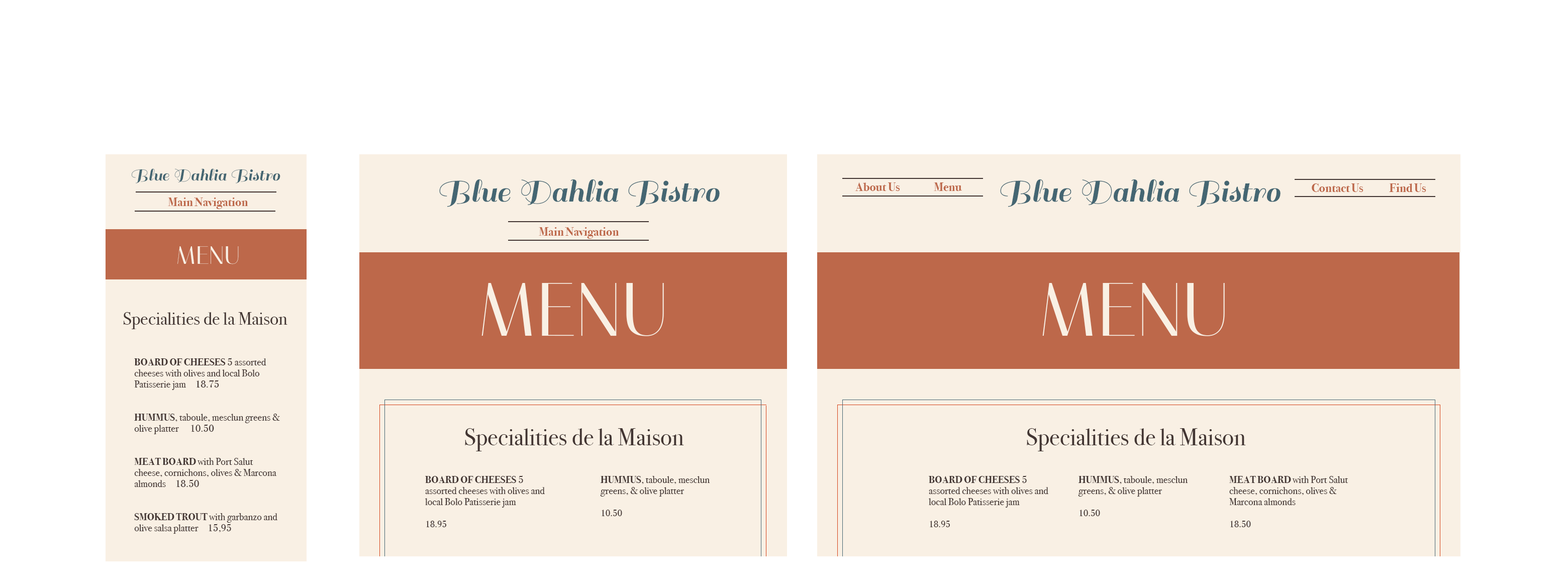
<style>
.page{position:relative;width:1568px;height:581px;background:#ffffff}
.page>*{position:absolute;margin:0}
.t1{font:18.1px "Sail-Regular";color:#456672}
.t2{font:34.2px "Sail-Regular";color:#456672}
.t3{font:12.1px "BodoniSvtyTwoITCTT-Bold";color:#bd684a}
.t4{font:25.1px "Italiana-Regular";color:#f9f0e4}
.t5{font:75.4px "Italiana-Regular";color:#f9f0e4}
.t6{font:18.1px "BodoniSvtyTwoITCTT-Book";color:#423532}
.t7{font:10.1px/11.1px "BodoniSvtyTwoITCTT-Book";color:#423532}
.t8{font:10.1px/11.1px "BodoniSvtyTwoITCTT-Bold";color:#423532;text-transform:uppercase}
.t9{font:24.1px "BodoniSvtyTwoITCTT-Book";color:#423532}
.t10{font:9px/11.1px "BodoniSvtyTwoITCTT-Book";color:#423532}
</style>
<div class="page">
<p class="t1" style="left:132px;top:168px;width:148px;height:15px">Blue Dahlia Bistro</p>
<p class="t2" style="left:439px;top:179px;width:281px;height:28px">Blue Dahlia Bistro</p>
<p class="t3" style="left:855px;top:182px;width:45px;height:9px">About Us</p>
<p class="t3" style="left:934px;top:182px;width:28px;height:9px">Menu</p>
<p class="t2" style="left:1000px;top:179px;width:281px;height:28px">Blue Dahlia Bistro</p>
<p class="t3" style="left:1312px;top:183px;width:51px;height:9px">Contact Us</p>
<p class="t3" style="left:1389px;top:183px;width:37px;height:9px">Find Us</p>
<p class="t3" style="left:168px;top:198px;width:80px;height:11px">Main Navigation</p>
<p class="t3" style="left:539px;top:227px;width:80px;height:12px">Main Navigation</p>
<p class="t4" style="left:177px;top:246px;width:62px;height:18px">MENU</p>
<p class="t5" style="left:481px;top:283px;width:183px;height:53px">MENU</p>
<p class="t5" style="left:1042px;top:283px;width:183px;height:53px">MENU</p>
<p class="t6" style="left:123px;top:312px;width:164px;height:17px">Specialities de la Maison</p>
<p class="t7" style="left:134px;top:358px;width:146px;height:176px"><span class="t8">Board of Cheeses</span> 5 assorted cheeses with olives and local Bolo <br>Patisserie jam     18.75<br><br><br><span class="t8">Hummus</span>, taboule, mesclun greens &amp; olive platter      10.50<br><br><br><span class="t8">meat board </span>with Port Salut cheese, cornichons, olives &amp; Marcona almonds     18.50<br><br><br><span class="t8">smoked trout </span>with garbanzo and olive salsa platter     15,95</p>
<p class="t9" style="left:465px;top:428px;width:219px;height:23px">Specialities de la Maison</p>
<p class="t9" style="left:1027px;top:428px;width:219px;height:23px">Specialities de la Maison</p>
<p class="t7" style="left:425px;top:475px;width:120px;height:52px"><span class="t8">Board of Cheeses</span> 5 assorted cheeses with olives and local Bolo Patisserie jam<br><br><span class="t10">18.95</span></p>
<p class="t7" style="left:600px;top:476px;width:110px;height:40px"><span class="t8">Hummus</span>, taboule, mesclun greens, &amp; olive platter<br><br><span class="t10">10.50</span></p>
<p class="t7" style="left:929px;top:475px;width:119px;height:52px"><span class="t8">Board of Cheeses</span> 5 assorted cheeses with olives and local Bolo Patisserie jam<br><br><span class="t10">18.95</span></p>
<p class="t7" style="left:1078px;top:476px;width:110px;height:40px"><span class="t8">Hummus</span>, taboule, mesclun greens, &amp; olive platter<br><br><span class="t10">10.50</span></p>
<p class="t7" style="left:1229px;top:476px;width:119px;height:51px"><span class="t8">meat board </span>with Port Salut cheese, cornichons, olives &amp; Marcona almonds<br><br><span class="t10">18.50</span></p>
</div>
